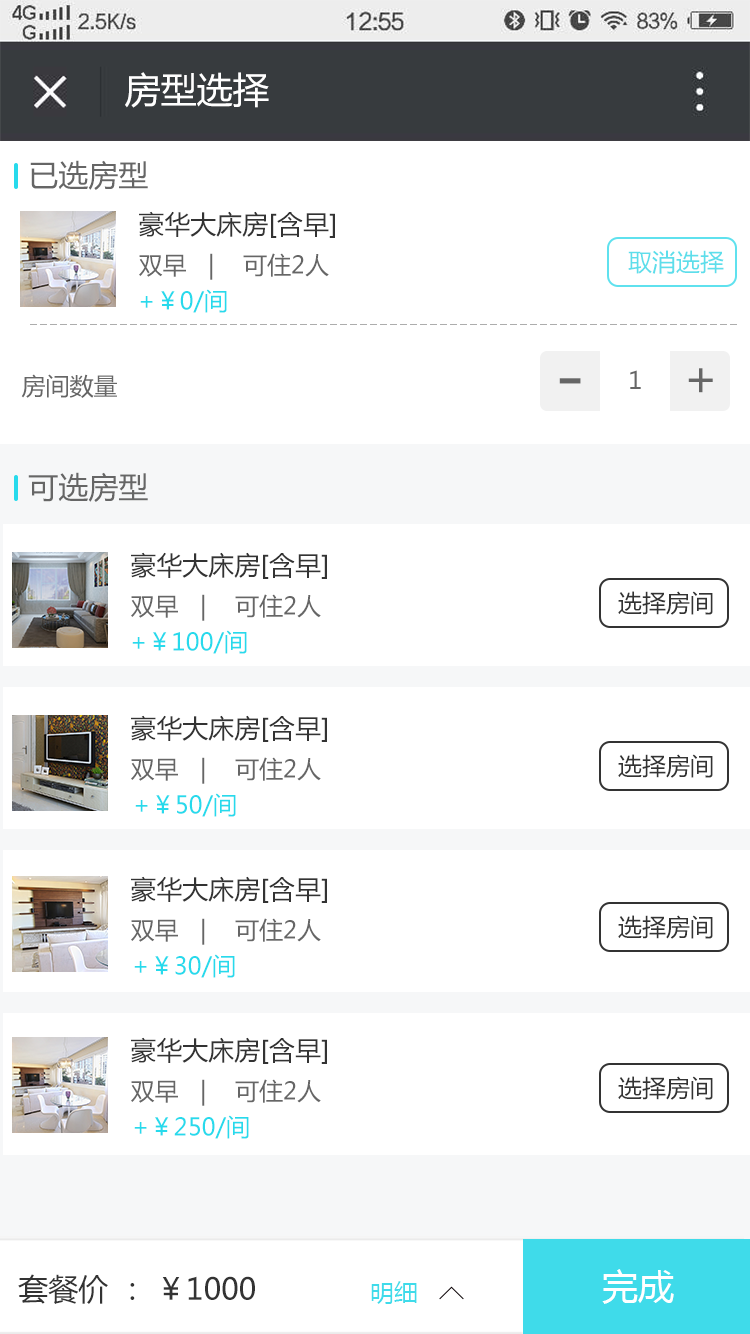
<style>
.page{position:relative;width:750px;height:1334px;background:#ffffff}
.page>*{position:absolute;margin:0}
.t1{font:36px "MicrosoftYaHei";color:#ffffff}
.t2{font:30px "MicrosoftYaHei";color:#666666}
.t3{font:26px "MicrosoftYaHei";color:#333333}
.t4{font:24px "MicrosoftYaHei";color:#666666}
.t5{font:24px "MicrosoftYaHei";color:#5ddeeb}
.t6{font:24px "MicrosoftYaHei";color:#27daec}
.t7{font:48px "MicrosoftYaHei";color:#666666}
.t8{font:72px "MicrosoftYaHei";color:#666666}
.t9{font:24px "MicrosoftYaHei";color:#333333}
.t10{font:30px "MicrosoftYaHei";color:#333333}
.t11{font:24px "MicrosoftYaHei";color:#3fdbea}
</style>
<div class="page">
<p class="t1" style="left:125px;top:72px;width:144px;height:36px">房型选择</p>
<p class="t2" style="left:30px;top:160px;width:118px;height:30px">已选房型</p>
<p class="t3" style="left:139px;top:211px;width:196px;height:27px">豪华大床房[含早]</p>
<p class="t4" style="left:139px;top:253px;width:190px;height:27px">双早   |    可住2人</p>
<p class="t5" style="left:628px;top:250px;width:96px;height:24px">取消选择</p>
<p class="t6" style="left:140px;top:289px;width:87px;height:24px">+￥0/间</p>
<p class="t4" style="left:21px;top:374px;width:96px;height:24px">房间数量</p>
<p class="t4" style="left:630px;top:370px;width:11px;height:19px">1</p>
<p class="t7" style="left:688px;top:368px;width:25px;height:25px">+</p>
<p class="t8" style="left:559px;top:378px;width:22px;height:6px">-</p>
<p class="t2" style="left:28px;top:472px;width:120px;height:30px">可选房型</p>
<p class="t3" style="left:131px;top:552px;width:196px;height:27px">豪华大床房[含早]</p>
<p class="t9" style="left:618px;top:591px;width:95px;height:24px">选择房间</p>
<p class="t4" style="left:131px;top:594px;width:190px;height:27px">双早   |    可住2人</p>
<p class="t6" style="left:132px;top:630px;width:115px;height:24px">+￥100/间</p>
<p class="t3" style="left:131px;top:715px;width:196px;height:27px">豪华大床房[含早]</p>
<p class="t4" style="left:131px;top:757px;width:190px;height:27px">双早   |    可住2人</p>
<p class="t9" style="left:618px;top:754px;width:95px;height:24px">选择房间</p>
<p class="t6" style="left:135px;top:793px;width:101px;height:24px">+￥50/间</p>
<p class="t3" style="left:131px;top:876px;width:196px;height:27px">豪华大床房[含早]</p>
<p class="t4" style="left:131px;top:918px;width:190px;height:27px">双早   |    可住2人</p>
<p class="t9" style="left:618px;top:915px;width:95px;height:24px">选择房间</p>
<p class="t6" style="left:134px;top:954px;width:101px;height:24px">+￥30/间</p>
<p class="t3" style="left:131px;top:1037px;width:196px;height:27px">豪华大床房[含早]</p>
<p class="t4" style="left:131px;top:1079px;width:190px;height:27px">双早   |    可住2人</p>
<p class="t9" style="left:618px;top:1076px;width:95px;height:24px">选择房间</p>
<p class="t6" style="left:134px;top:1115px;width:115px;height:24px">+￥250/间</p>
<p class="t10" style="left:18px;top:1274px;width:237px;height:30px">套餐价 ： ￥1000</p>
<p class="t1" style="left:602px;top:1269px;width:72px;height:35px">完成</p>
<p class="t11" style="left:371px;top:1281px;width:46px;height:23px">明细</p>
</div>
